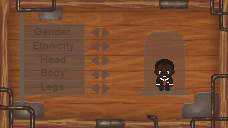
<style>
.page{position:relative;width:228px;height:128px}
.page>*{position:absolute;margin:0}
.t1{font:10px "ArialMT";letter-spacing:0.05em;color:#51422d}
</style>
<div class="page">
<p class="t1" style="left:34px;top:28px;width:37px;height:7px">Gender</p>
<p class="t1" style="left:33px;top:42px;width:42px;height:9px">Ethnicity</p>
<p class="t1" style="left:41px;top:56px;width:25px;height:7px">Head</p>
<p class="t1" style="left:41px;top:69px;width:24px;height:9px">Body</p>
<p class="t1" style="left:41px;top:83px;width:23px;height:9px">Legs</p>
</div>
